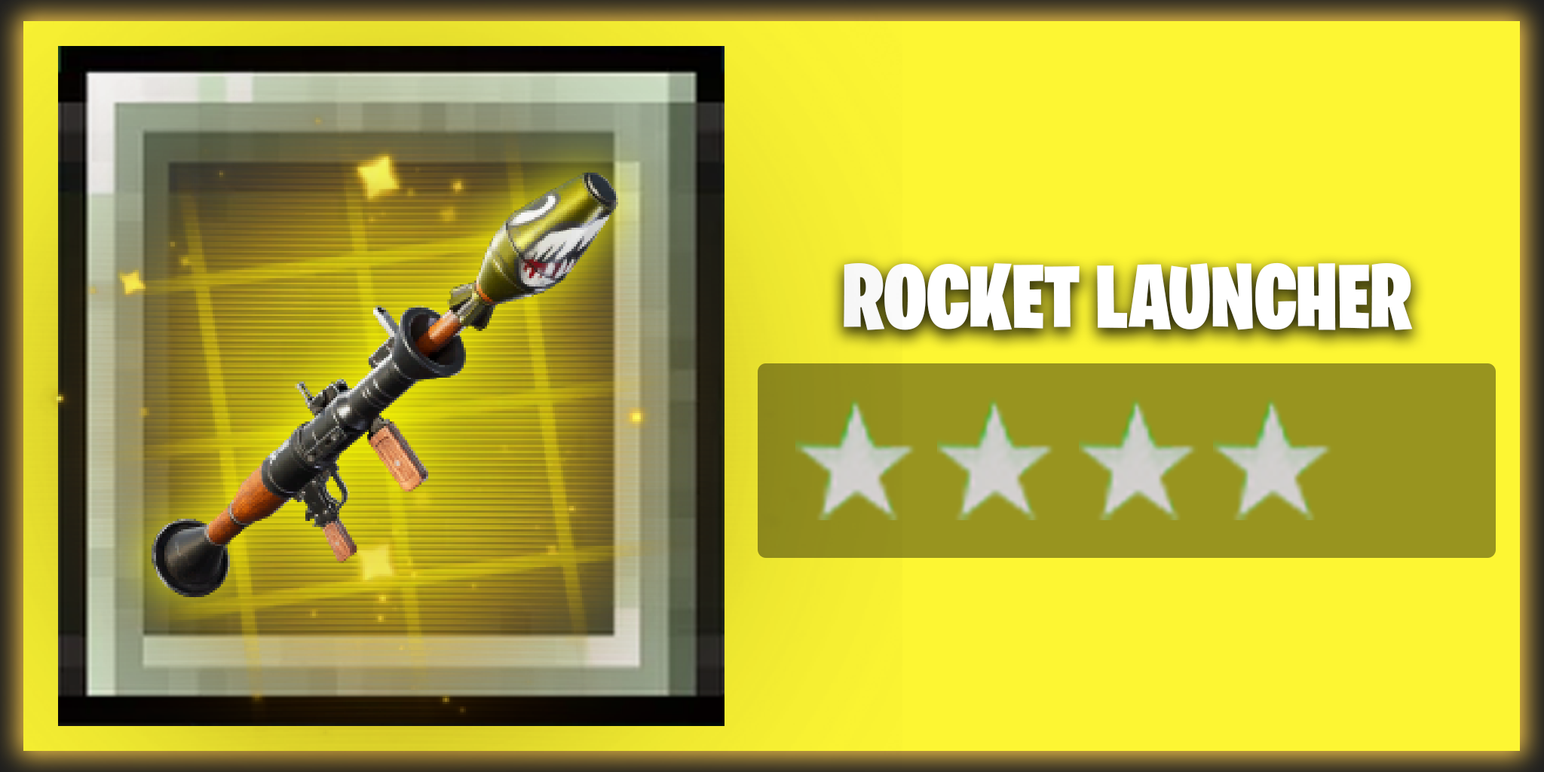
<style>
.page{position:relative;width:1544px;height:772px;background:#fdf633}
.page>*{position:absolute;margin:0}
.t1{font:90.5px "BurbankBigCondensed-Black";color:#ffffff}
</style>
<div class="page">
<p class="t1" style="left:844px;top:262px;width:569px;height:69px">ROCKET LAUNCHER</p>
</div>
